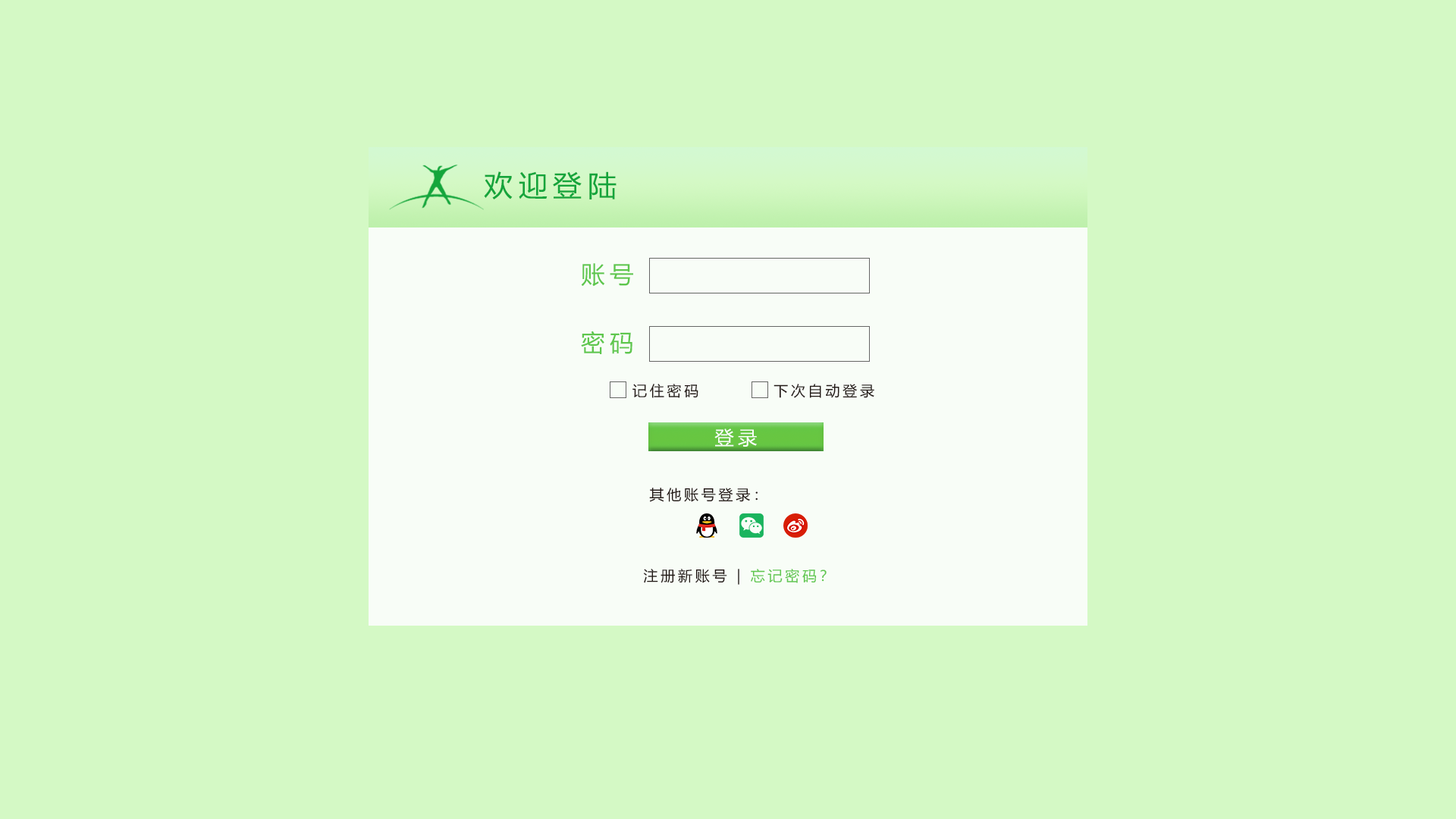
<style>
.page{position:relative;width:1456px;height:819px;background:#d4f9c5}
.page>*{position:absolute;margin:0}
.t1{font:28.7px "MicrosoftYaHei";letter-spacing:0.2em;color:#14a53b}
.t2{font:23.9px "MicrosoftYaHei";letter-spacing:0.2em;color:#5ec74d}
.t3{font:14.4px "MicrosoftYaHei";letter-spacing:0.2em;color:#221815}
.t4{font:19.2px "MicrosoftYaHei";letter-spacing:0.2em;color:#f8fdf7}
.t5{font:14.4px "MicrosoftYaHei";letter-spacing:0.2em;color:#5ec74d}
</style>
<div class="page">
<p class="t1" style="left:484px;top:171px;width:133px;height:28px">欢迎登陆</p>
<p class="t2" style="left:581px;top:263px;width:52px;height:24px">账号</p>
<p class="t2" style="left:581px;top:331px;width:51px;height:23px">密码</p>
<p class="t3" style="left:632px;top:384px;width:66px;height:14px">记住密码</p>
<p class="t3" style="left:773px;top:384px;width:101px;height:14px">下次自动登录</p>
<p class="t4" style="left:714px;top:428px;width:43px;height:19px">登录</p>
<p class="t3" style="left:649px;top:488px;width:109px;height:14px">其他账号登录：</p>
<p class="t3" style="left:643px;top:569px;width:184px;height:16px">注册新账号 | <span class="t5">忘记密码？</span></p>
</div>
